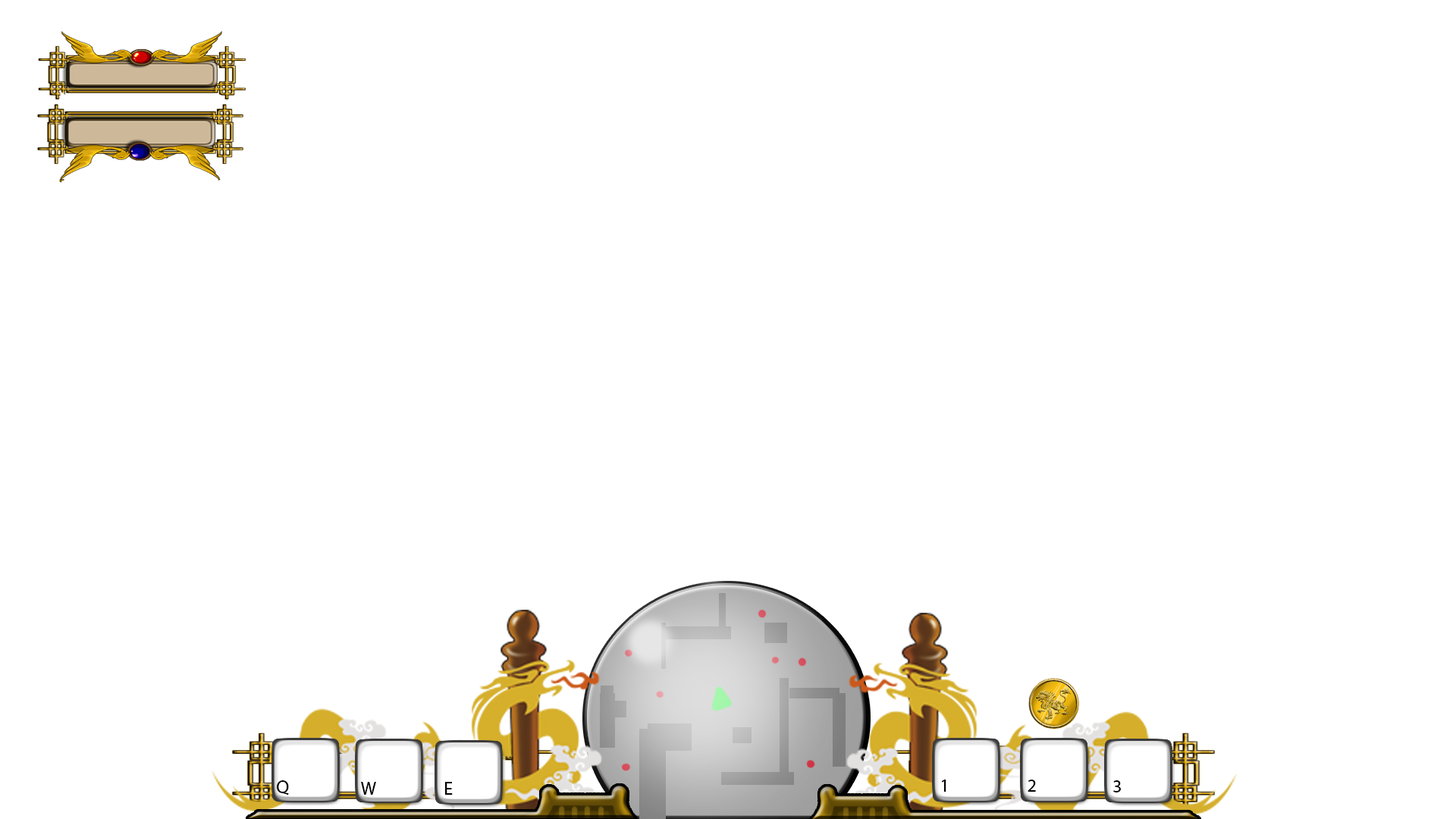
<style>
.page{position:relative;width:1456px;height:819px;background:#ffffff}
.page>*{position:absolute;margin:0}
.t1{font:18.2px "MyriadHebrew-Regular";color:#000000}
</style>
<div class="page">
<p class="t1" style="left:277px;top:780px;width:12px;height:15px">Q</p>
<p class="t1" style="left:361px;top:782px;width:15px;height:13px">W</p>
<p class="t1" style="left:445px;top:782px;width:8px;height:13px">E</p>
<p class="t1" style="left:941px;top:780px;width:5px;height:12px">1</p>
<p class="t1" style="left:1028px;top:780px;width:8px;height:12px">2</p>
<p class="t1" style="left:1113px;top:780px;width:8px;height:12px">3</p>
</div>
